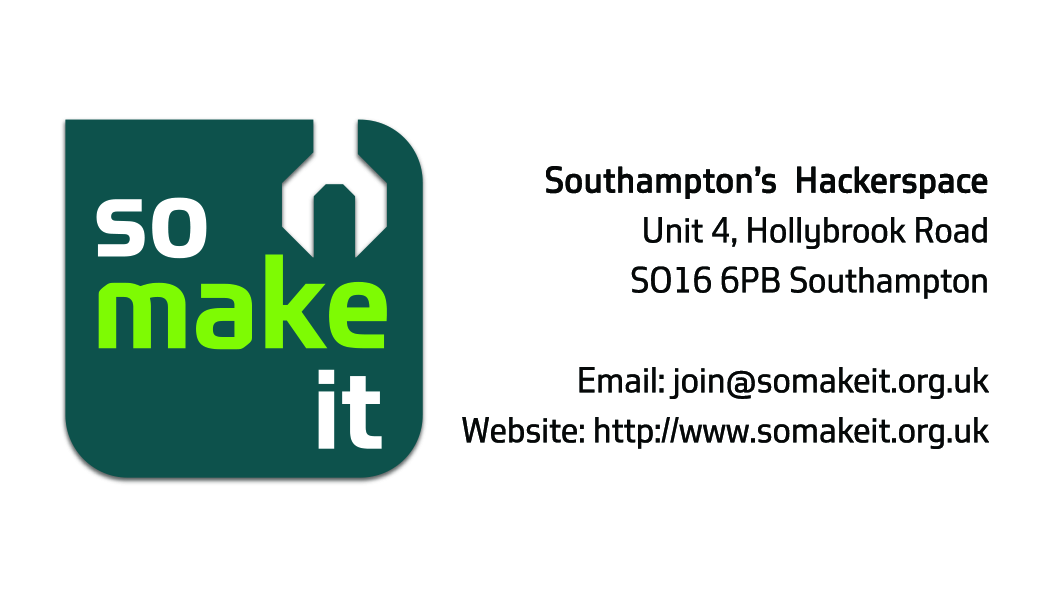
<style>
.page{position:relative;width:1062px;height:615px;background:#ffffff}
.page>*{position:absolute;margin:0}
.t1{font:33.3px/50px "Southampton";color:#060808}
.t2{font:33.3px/50px "Southampton";color:#060808;font-weight:bold}
.t3{font:33.3px "Southampton";color:#060808}
</style>
<div class="page">
<p class="t1" style="left:462px;top:166px;width:527px;height:283px;text-align:right"><span class="t2">Southampton’s  Hackerspace<br></span> Unit 4, Hollybrook Road<br>SO16 6PB Southampton<br><br>Email: join@somakeit.org.uk<br>Website: http://www.somakeit.org.uk<br><span class="t3"><br><br><br>Website http://www.somakeit.org.uk</span></p>
</div>
